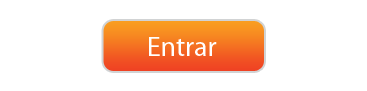
<style>
.page{position:relative;width:367px;height:91px;background:#ffffff}
.page>*{position:absolute;margin:0}
.t1{font:27.9px "MyriadPro-Regular";color:#ffffff}
</style>
<div class="page">
<p class="t1" style="left:149px;top:37px;width:68px;height:19px">Entrar</p>
</div>
